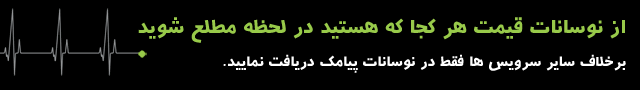
<style>
.page{position:relative;width:640px;height:90px;background:#000000}
.page>*{position:absolute;margin:0}
.t1{font:25px "B-aban";color:#98ca4a}
.t2{font:18px "B-aban";color:#ffffff}
</style>
<div class="page">
<p class="t1" style="left:138px;top:17px;width:487px;height:26px">از نوسانات قیمت هر کجا که هستید در لحظه مطلع شوید</p>
<p class="t2" style="left:223px;top:54px;width:403px;height:19px">برخلاف سایر سرویس ها فقط در نوسانات پیامک دریافت نمایید.</p>
</div>
